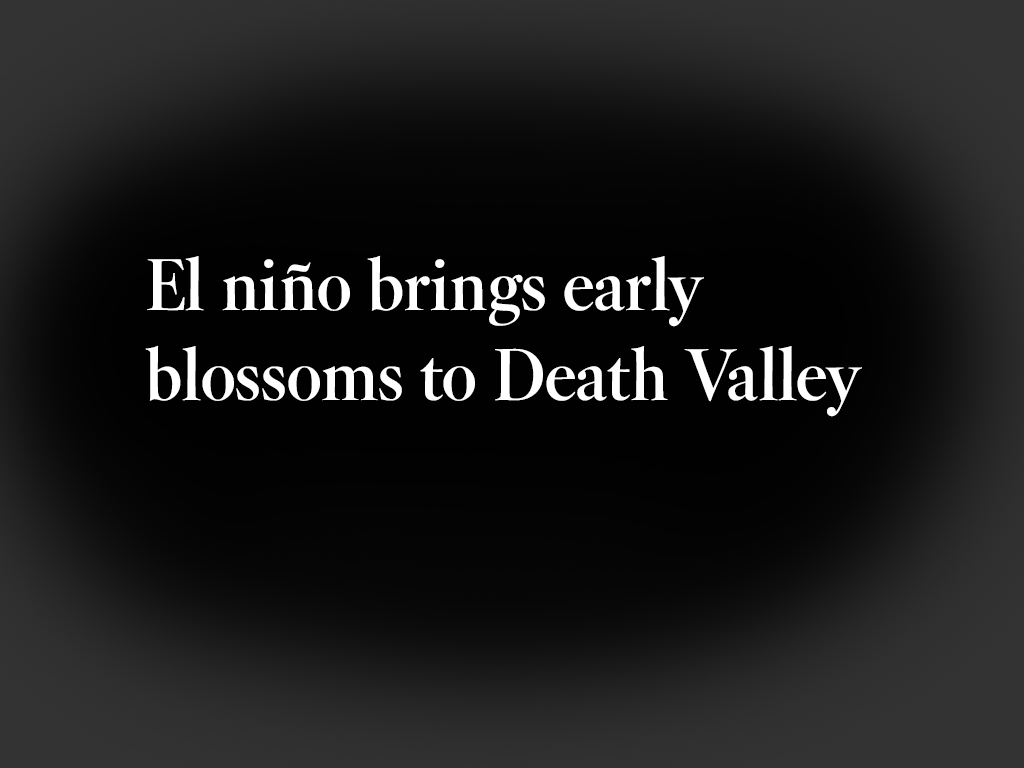
<style>
.page{position:relative;width:1024px;height:768px}
.page>*{position:absolute;margin:0}
.t1{font:75px "LABannerDisplay-Regular";color:#ffffff}
</style>
<div class="page">
<p class="t1" style="left:145px;top:255px;width:717px;height:162px">El niño brings early<br>blossoms to Death Valley</p>
</div>
